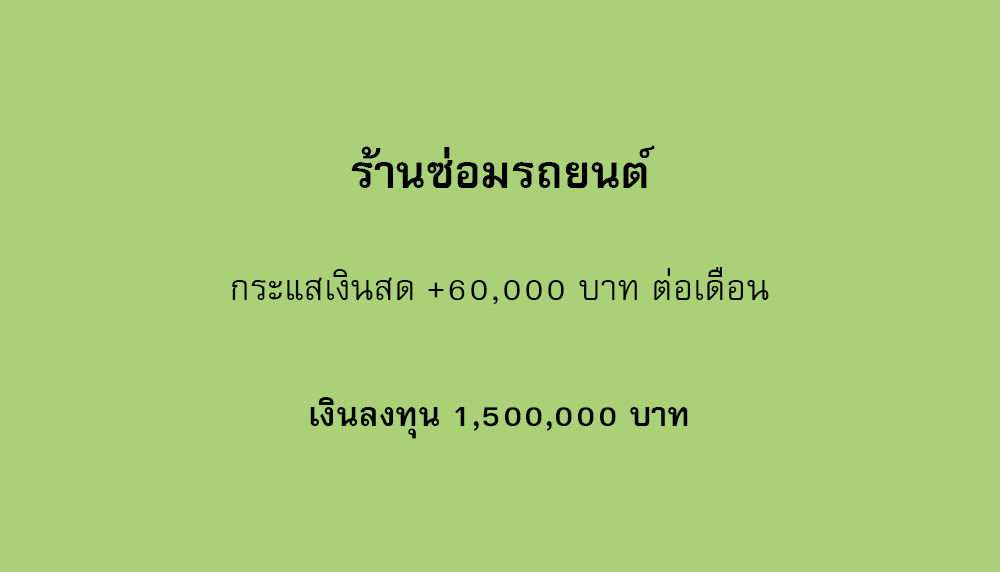
<style>
.page{position:relative;width:1000px;height:572px;background:#aad178}
.page>*{position:absolute;margin:0}
.t1{font:64px "FreesiaUPCBold";color:#000000}
.t2{font:50px "FreesiaUPC";color:#000000}
.t3{font:47px "FreesiaUPCBold";color:#000000}
</style>
<div class="page">
<p class="t1" style="left:351px;top:145px;width:304px;height:43px">ร้านซ่อมรถยนต์</p>
<p class="t2" style="left:232px;top:267px;width:537px;height:38px">กระแสเงินสด +60,000 บาท ต่อเดือน</p>
<p class="t3" style="left:310px;top:397px;width:378px;height:42px">เงินลงทุน 1,500,000 บาท</p>
</div>
